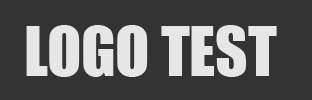
<style>
.page{position:relative;width:312px;height:100px;background:#333333}
.page>*{position:absolute;margin:0}
.t1{font:62.5px "Impact";color:#e6e6e6}
</style>
<div class="page">
<p class="t1" style="left:26px;top:25px;width:251px;height:52px">LOGO TEST</p>
</div>
